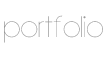
<style>
.page{position:relative;width:107px;height:60px;background:#ffffff}
.page>*{position:absolute;margin:0}
.t1{font:20.8px "BondoluoPeek";color:#9a9a9a}
</style>
<div class="page">
<p class="t1" style="left:4px;top:15px;width:99px;height:28px">Portfolio</p>
</div>
